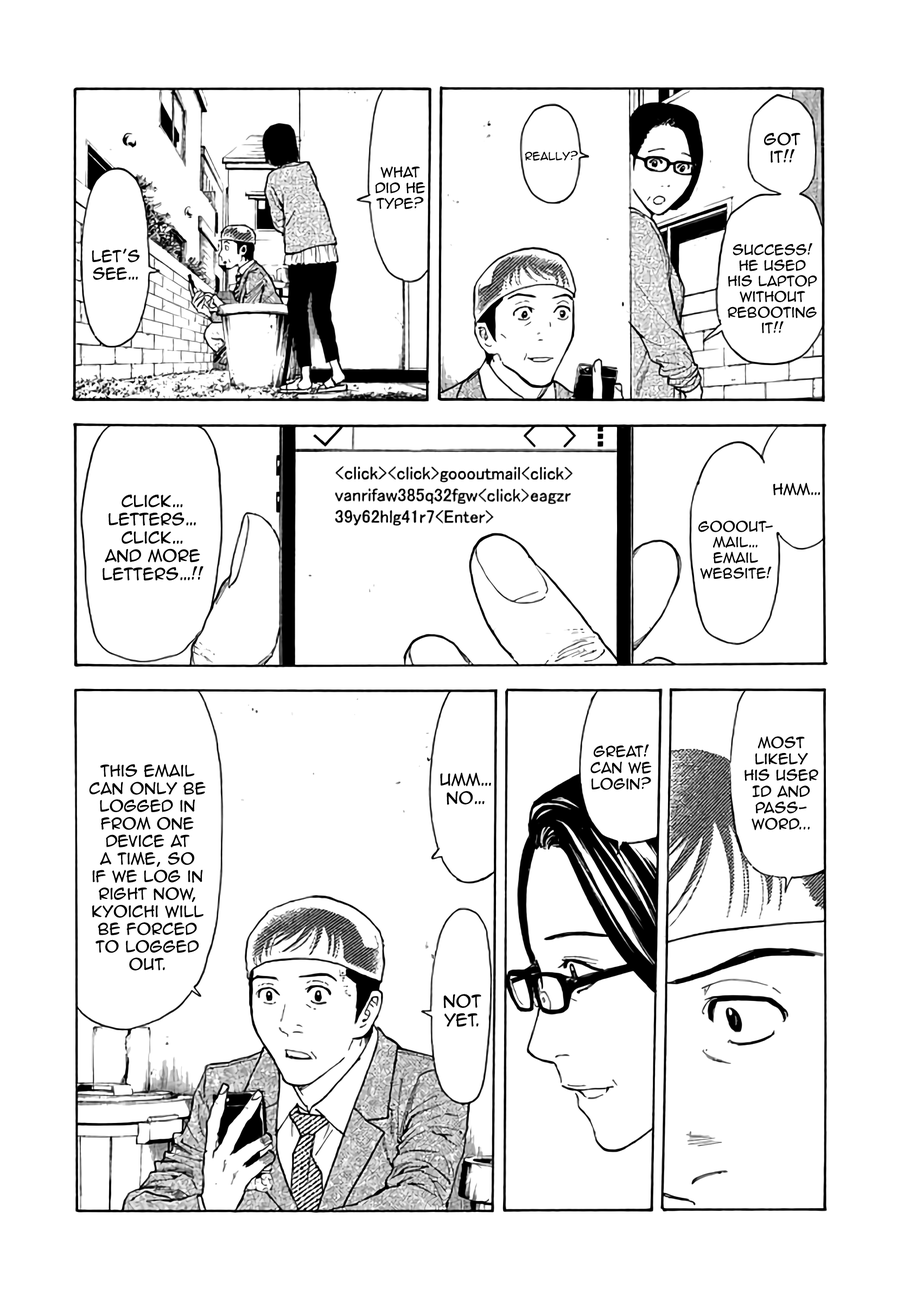
<style>
.page{position:relative;width:916px;height:1302px;background:#ffffff}
.page>*{position:absolute;margin:0}
.t1{font:14.6px "AnimeAce2.0BB";color:#000000}
.t2{font:10.3px "AnimeAce2.0BB";color:#000000}
.t3{font:13px "AnimeAce2.0BB";color:#000000}
.t4{font:14.1px "AnimeAce2.0BB";color:#000000}
.t5{font:15.2px "AnimeAce2.0BB";color:#000000}
.t6{font:13.6px "AnimeAce2.0BB";color:#000000}
.t7{font:15.7px "AnimeAce2.0BB";color:#000000}
</style>
<div class="page">
<p class="t1" style="left:764px;top:132px;width:36px;height:31px;text-align:center">Got <br>it!!</p>
<p class="t2" style="left:525px;top:151px;width:53px;height:10px">Really?</p>
<p class="t3" style="left:375px;top:166px;width:50px;height:43px;text-align:center">What <br>did he type?</p>
<p class="t3" style="left:728px;top:243px;width:89px;height:91px;text-align:center">Success! <br>He used<br>his laptop <br>without <br>rebooting<br>it!!</p>
<p class="t1" style="left:92px;top:248px;width:47px;height:32px;text-align:center">let’s see…</p>
<p class="t4" style="left:773px;top:483px;width:47px;height:13px">hmm…</p>
<p class="t5" style="left:103px;top:494px;width:100px;height:87px;text-align:center">Click… <br>letters… <br>click… <br>and more<br>letters…!!</p>
<p class="t3" style="left:698px;top:520px;width:75px;height:59px;text-align:center">Goooutmail… <br>email <br>website!</p>
<p class="t6" style="left:744px;top:736px;width:74px;height:95px;text-align:center">most likely <br>his user <br>ID and <br>password...</p>
<p class="t6" style="left:590px;top:744px;width:62px;height:46px;text-align:center">Great! <br>Can we <br>login?</p>
<p class="t1" style="left:89px;top:764px;width:117px;height:207px;text-align:center">This email <br>can only be <br>logged in <br>from one device at <br>a time, so<br>if we log in<br>right now, <br>Kyoichi will <br>be forced <br>to logged<br>out.</p>
<p class="t5" style="left:440px;top:773px;width:51px;height:32px;text-align:center">Umm… no…</p>
<p class="t7" style="left:443px;top:994px;width:38px;height:33px;text-align:center">Not <br>yet.</p>
</div>
